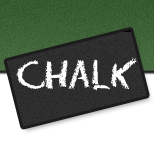
<style>
.page{position:relative;width:154px;height:154px;background:#ffffff}
.page>*{position:absolute;margin:0}
.t1{font:36px "Eraser-Regular";letter-spacing:-0.02em;color:#ffffff}
</style>
<div class="page">
<p class="t1" style="left:16px;top:57px;width:121px;height:34px">Chalk</p>
</div>
